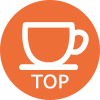
<style>
.page{position:relative;width:100px;height:100px;background:#ed6e36}
.page>*{position:absolute;margin:0}
.t1{font:18px "Meiryo";letter-spacing:0.01em;color:#ffffff;font-weight:bold}
</style>
<div class="page">
<p class="t1" style="left:31px;top:74px;width:38px;height:15px">TOP</p>
</div>
